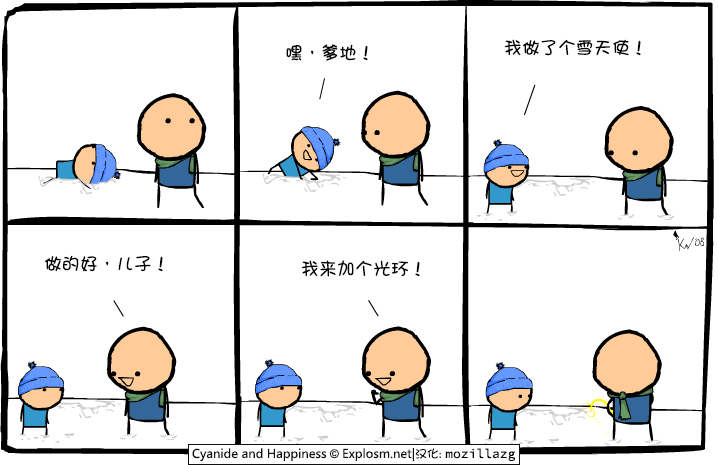
<style>
.page{position:relative;width:718px;height:465px;background:#ffffff}
.page>*{position:absolute;margin:0}
.t1{font:18px "DFGirl";color:#000000}
</style>
<div class="page">
<p class="t1" style="left:504px;top:39px;width:137px;height:17px">我做了个雪天使！</p>
<p class="t1" style="left:286px;top:44px;width:82px;height:17px">嘿，爹地！</p>
<p class="t1" style="left:44px;top:255px;width:119px;height:17px">做的好，儿子！</p>
<p class="t1" style="left:301px;top:260px;width:119px;height:17px">我来加个光环！</p>
</div>
